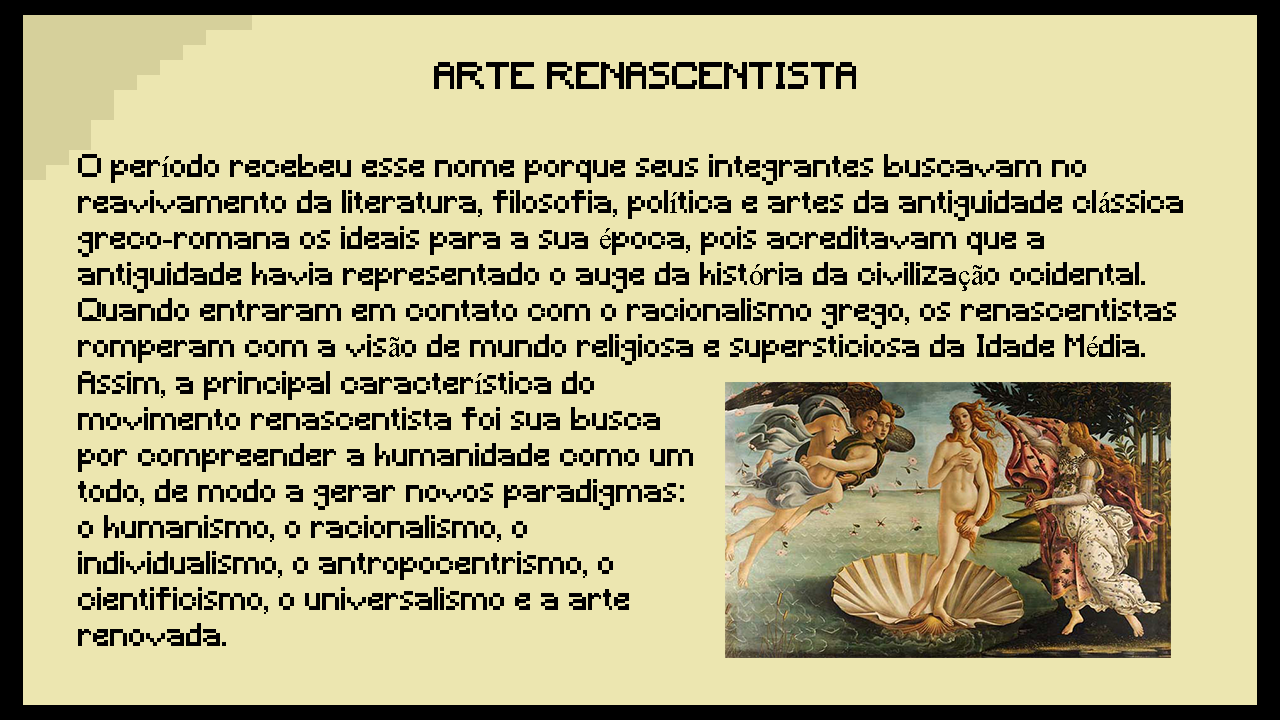
<style>
.page{position:relative;width:1280px;height:720px;background:#ece6b0}
.page>*{position:absolute;margin:0}
.t1{font:36px "Minecraft";color:#000000}
.t2{font:30px "Minecraft";color:#000000}
.t3{font:30px "TimesNewRomanPSMT";color:#000000}
</style>
<div class="page">
<p class="t1" style="left:434px;top:62px;width:422px;height:27px">ARTE RENASCENTISTA</p>
<p class="t2" style="left:78px;top:154px;width:1105px;height:211px">O per<span class="t3">í</span>odo recebeu esse nome porque seus integrantes buscavam no reavivamento da literatura, filosofia, pol<span class="t3">í</span>tica e artes da antiguidade cl<span class="t3">á</span>ssica greco-romana os ideais para a sua <span class="t3">é</span>poca, pois acreditavam que a antiguidade havia representado o auge da hist<span class="t3">ó</span>ria da civiliza<span class="t3">çã</span>o ocidental. Quando entraram em contato com o racionalismo grego, os renascentistas romperam com a vis<span class="t3">ã</span>o de mundo religiosa e supersticiosa da Idade M<span class="t3">é</span>dia. Assim, a principal caracter<span class="t3">í</span>stica do movimento renascentista foi sua busca por compreender a humanidade como um todo, de modo a gerar novos paradigmas:  o humanismo, o racionalismo, o individualismo, o antropocentrismo, o cientificismo, o universalismo e a arte renovada.</p>
<p class="t2" style="left:78px;top:371px;width:615px;height:275px">Assim, a principal caracter<span class="t3">í</span>stica do movimento renascentista foi sua busca por compreender a humanidade como um todo, de modo a gerar novos paradigmas:  o humanismo, o racionalismo, o individualismo, o antropocentrismo, o cientificismo, o universalismo e a arte renovada.</p>
</div>
